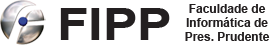
<style>
.page{position:relative;width:275px;height:45px;background:#ffffff}
.page>*{position:absolute;margin:0}
.t1{font:12px "Arial-BoldMT";color:#231f20}
.t2{font:44.5px "Arial-BoldMT";color:#231f20;scale:1.16 1}
</style>
<div class="page">
<p class="t1" style="left:185px;top:4px;width:85px;height:37px;text-align:center">Faculdade de<br>Informática de<br>Pres. Prudente</p>
<p class="t2" style="left:60px;top:8px;width:110px;height:32px">FIPP</p>
</div>
